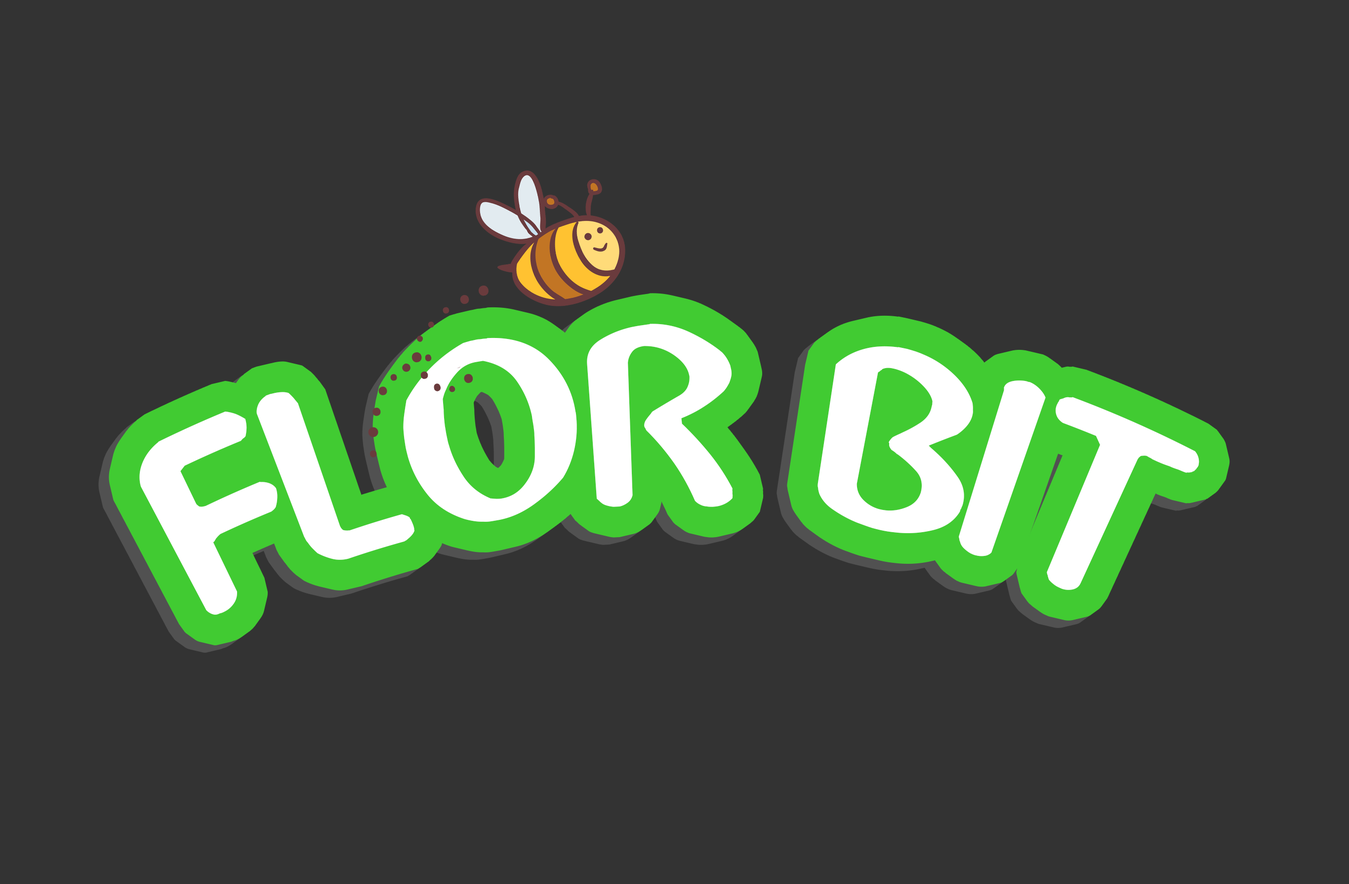
<style>
.page{position:relative;width:1349px;height:884px;background:#333333}
.page>*{position:absolute;margin:0}
.t1{font:275px "Abbey-Medium";color:#ffffff}
</style>
<div class="page">
<p class="t1" style="left:139px;top:324px;width:1060px;height:291px">FLOR BIT</p>
</div>
